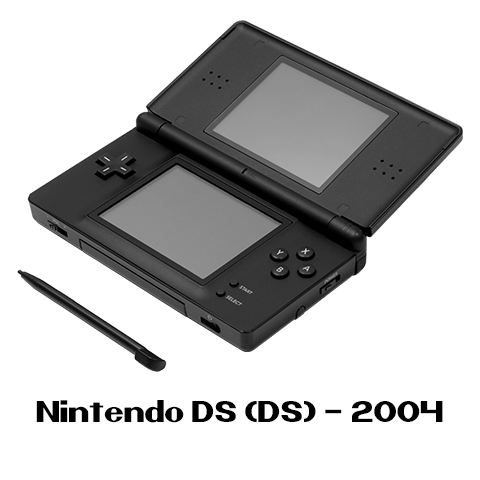
<style>
.page{position:relative;width:480px;height:480px;background:#ffffff}
.page>*{position:absolute;margin:0}
.t1{font:30px "Nintender";color:#000000}
</style>
<div class="page">
<p class="t1" style="left:36px;top:400px;width:407px;height:23px">Nintendo DS (DS) - 2004</p>
</div>
